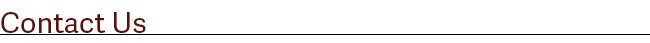
<style>
.page{position:relative;width:650px;height:43px;background:#ffffff}
.page>*{position:absolute;margin:0}
.t1{font:28.7px "AdelleSans-Regular";color:#5d0f0f}
</style>
<div class="page">
<p class="t1" style="left:1px;top:12px;width:145px;height:21px">Contact Us</p>
</div>
